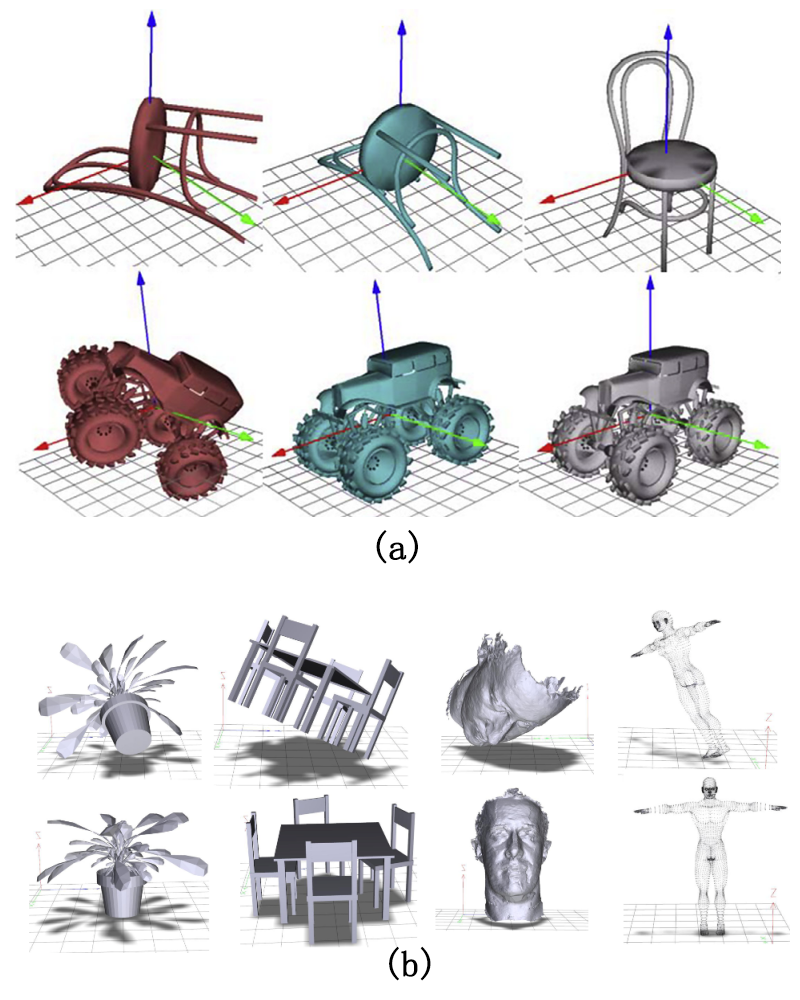
<style>
.page{position:relative;width:800px;height:1000px;background:#ffffff}
.page>*{position:absolute;margin:0}
.t1{font:36px "NSimSun";color:#000000;font-weight:bold}
</style>
<div class="page">
<p class="t1" style="left:376px;top:530px;width:42px;height:34px">(a)</p>
<p class="t1" style="left:389px;top:946px;width:42px;height:35px">(b)</p>
</div>
